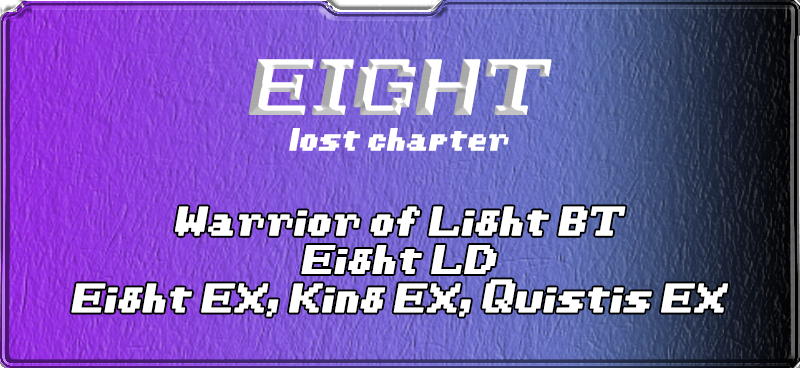
<style>
.page{position:relative;width:800px;height:368px}
.page>*{position:absolute;margin:0}
.t1{font:61.5px "Final-Fantasy";font-weight:bold;font-style:italic}
.t2{font:24.9px "Final-Fantasy";color:#ffffff;font-weight:bold;font-style:italic}
.t3{font:32px "Final-Fantasy";color:#ffffff;font-weight:bold;font-style:italic}
</style>
<div class="page">
<p class="t1" style="left:248px;top:59px;width:304px;height:56px">EIGHT</p>
<p class="t2" style="left:289px;top:128px;width:220px;height:23px">lost chapter</p>
<p class="t3" style="left:71px;top:206px;width:657px;height:111px;text-align:center">Warrior of Light BT<br>Eight LD<br>Eight EX, King EX, Quistis EX</p>
</div>
